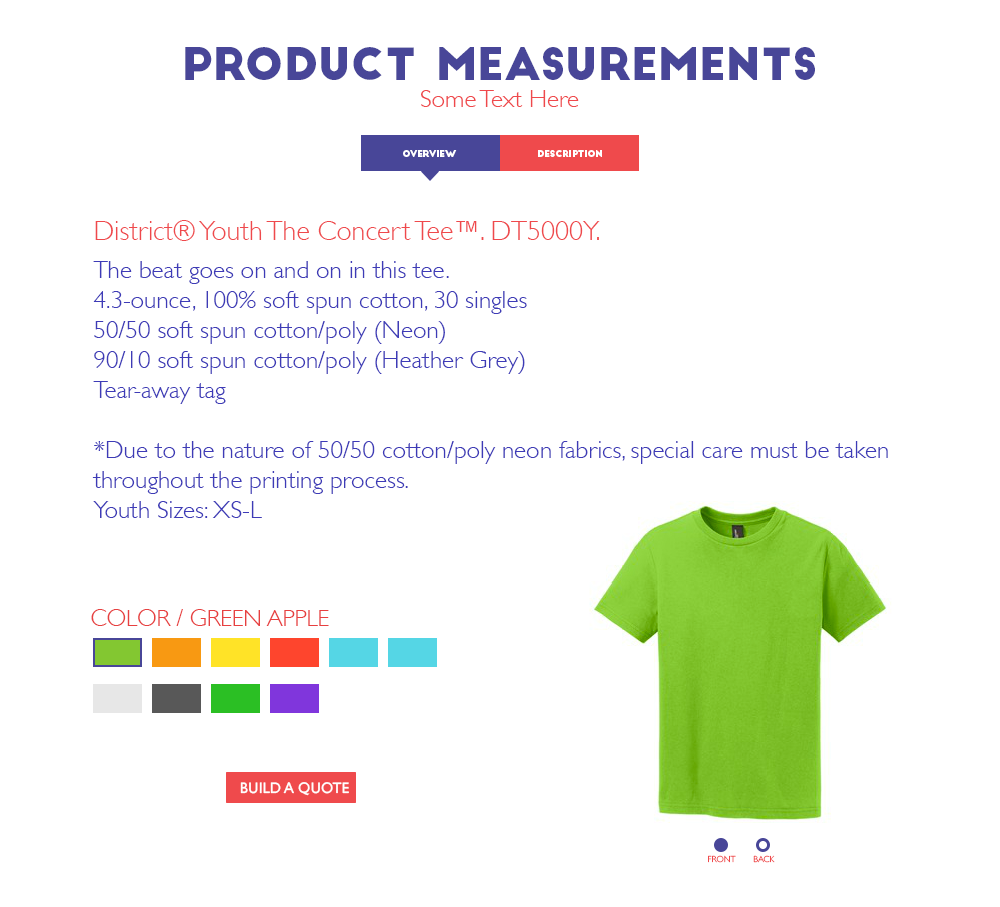
<style>
.page{position:relative;width:1000px;height:907px;background:#ffffff}
.page>*{position:absolute;margin:0}
.t1{font:44px "BigJohn";color:#484698}
.t2{font:24.9px "GillSans-Light";color:#ef494c}
.t3{font:9px "BigJohn";color:#ffffff}
.t4{font:28px "GillSans-Light";color:#ef494c}
.t5{font:25px "GillSans-Light";color:#3e3bb7}
.t6{font:23.6px "GillSans-Light";color:#e74040}
.t7{font:15.3px "GillSans";color:#ffffff}
.t8{font:8.9px "GillSans-Light";color:#ef4a4c}
</style>
<div class="page">
<p class="t1" style="left:185px;top:47px;width:630px;height:33px">PRODUCT MEASUREMENTS</p>
<p class="t2" style="left:421px;top:90px;width:158px;height:17px">Some Text Here</p>
<p class="t3" style="left:403px;top:150px;width:54px;height:7px">overview</p>
<p class="t3" style="left:538px;top:150px;width:64px;height:7px">description</p>
<p class="t4" style="left:95px;top:220px;width:505px;height:21px">District® Youth The Concert Tee™. DT5000Y.</p>
<p class="t5" style="left:92px;top:261px;width:796px;height:257px">The beat goes on and on in this tee. <br>4.3-ounce, 100% soft spun cotton, 30 singles<br>50/50 soft spun cotton/poly (Neon)<br>90/10 soft spun cotton/poly (Heather Grey)<br>Tear-away tag<br><br>*Due to the nature of 50/50 cotton/poly neon fabrics, special care must be taken throughout the printing process.<br>Youth Sizes: XS-L</p>
<p class="t6" style="left:91px;top:609px;width:238px;height:17px">COLOR / GREEN APPLE</p>
<p class="t7" style="left:240px;top:782px;width:109px;height:14px">BUILD A QUOTE</p>
<p class="t8" style="left:708px;top:855px;width:28px;height:8px">FRONT</p>
<p class="t8" style="left:753px;top:855px;width:22px;height:8px">BACK</p>
</div>
